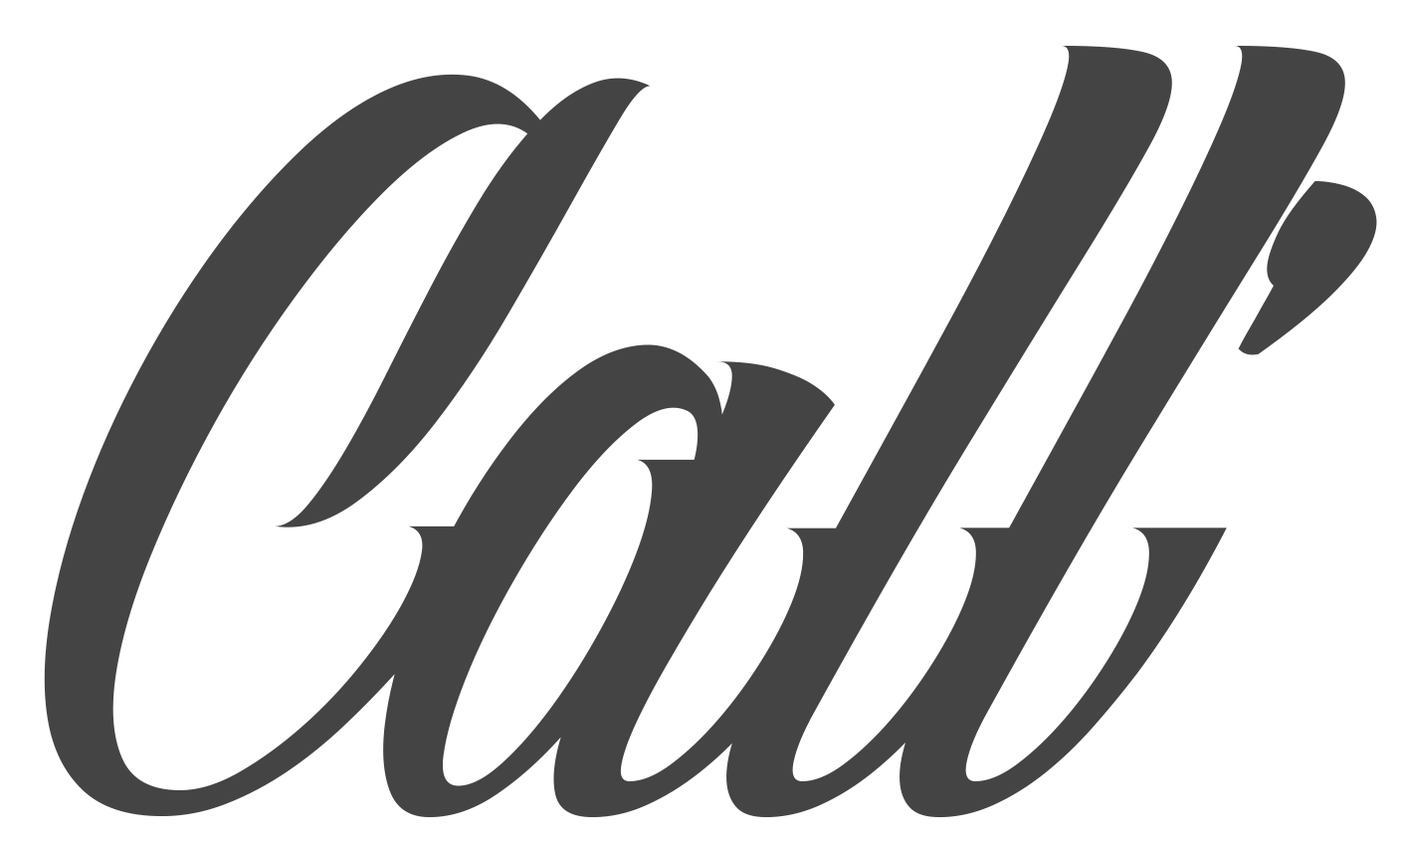
<style>
.page{position:relative;width:1406px;height:848px;background:#ffffff}
.page>*{position:absolute;margin:0}
.t1{font:900.7px "AngillaTattooPersonalUse";color:#444444}
</style>
<div class="page">
<p class="t1" style="left:44px;top:45px;width:1333px;height:772px">Call’</p>
</div>
